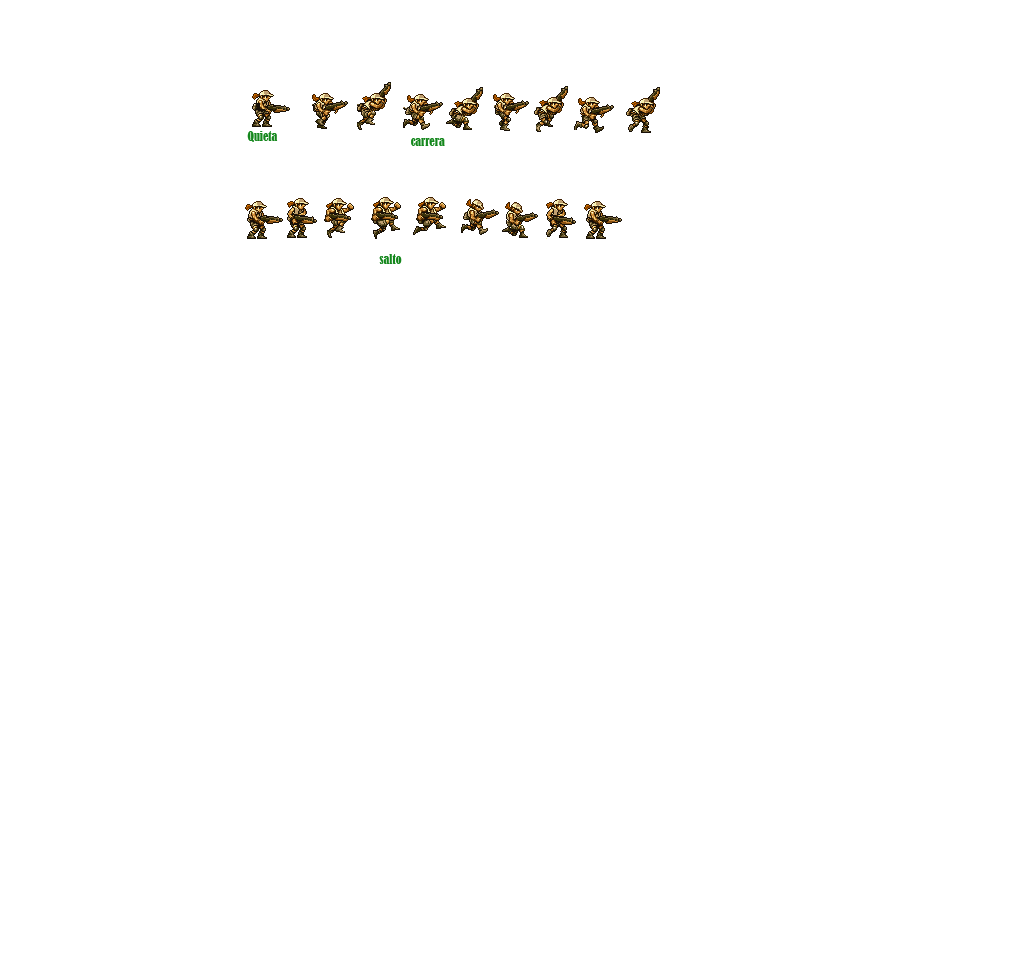
<style>
.page{position:relative;width:1022px;height:964px;background:#ffffff}
.page>*{position:absolute;margin:0}
.t1{font:12px "BernardMT-Condensed";color:#14871c}
</style>
<div class="page">
<p class="t1" style="left:247px;top:131px;width:31px;height:11px">Quieta</p>
<p class="t1" style="left:411px;top:138px;width:34px;height:8px">carrera</p>
<p class="t1" style="left:379px;top:254px;width:23px;height:10px">salto</p>
</div>
